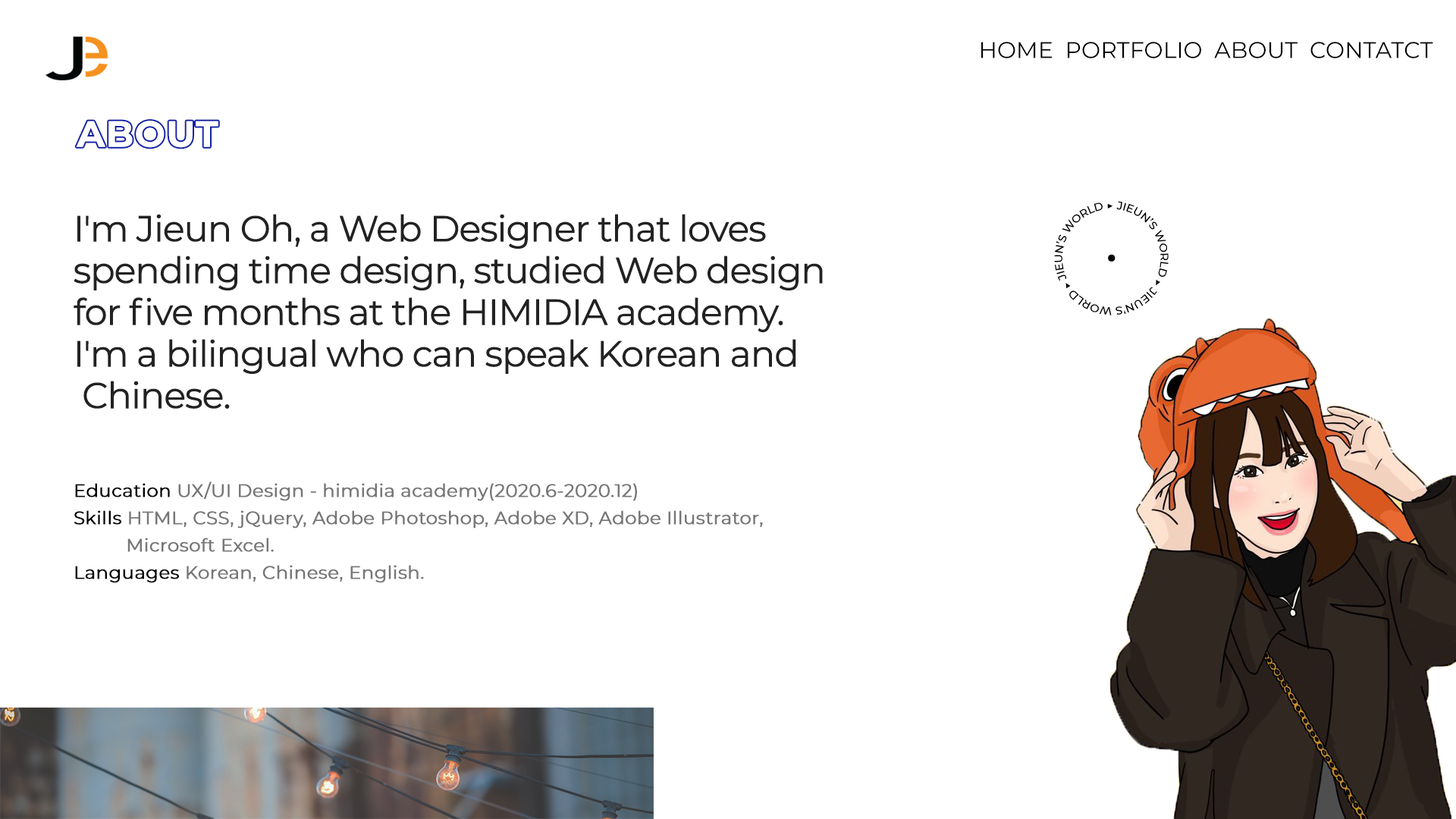
<style>
.page{position:relative;width:1456px;height:819px;background:#ffffff}
.page>*{position:absolute;margin:0}
.t1{font:22.7px "Montserrat-Regular";color:#000000}
.t2{font:36.4px "Montserrat-Bold";color:#ffffff;font-weight:bold}
.t3{font:36.4px/41.7px "Montserrat-Regular";letter-spacing:-0.05em;color:#222222;font-weight:bold}
.t4{font:18.2px/27.3px "Montserrat-Regular";color:#777777;font-weight:bold}
.t5{font:18.2px/27.3px "Montserrat-Regular";color:#000000;font-weight:bold}
</style>
<div class="page">
<p class="t1" style="left:981px;top:42px;width:452px;height:16px">HOME  PORTFOLIO  ABOUT  CONTATCT</p>
<p class="t2" style="left:76px;top:121px;width:142px;height:27px">ABOUT</p>
<p class="t3" style="left:74px;top:214px;width:749px;height:195px">I'm Jieun Oh, a Web Designer that loves <br>spending time design, studied Web design<br>for five months at the HIMIDIA academy.<br>I'm a bilingual who can speak Korean and<br> Chinese.</p>
<p class="t4" style="left:74px;top:482px;width:689px;height:101px"><span class="t5">Education </span>UX/UI Design - himidia academy(2020.6-2020.12)<br><span class="t5">Skills </span>HTML, CSS, jQuery, Adobe Photoshop, Adobe XD, Adobe Illustrator, <br>          Microsoft Excel. <br><span class="t5">Languages </span>Korean, Chinese, English.</p>
</div>
